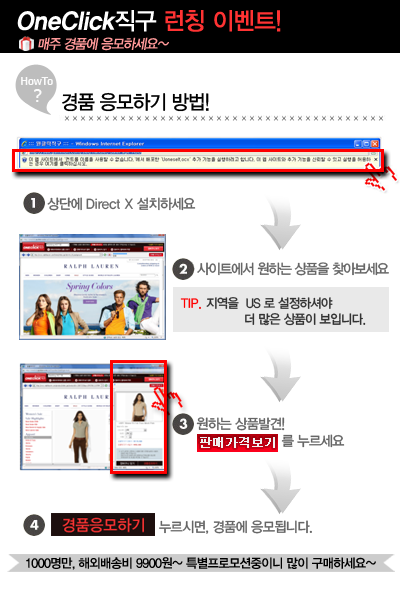
<style>
.page{position:relative;width:400px;height:591px;background:#ffffff}
.page>*{position:absolute;margin:0}
.t1{font:24px "YDIYGO350";letter-spacing:-0.025em;color:#ffffff;font-style:italic;scale:0.97 1}
.t2{font:24px "YDIYGO330";letter-spacing:-0.025em;color:#ffffff;scale:0.97 1}
.t3{font:24px "YDIYGO330";letter-spacing:-0.025em;color:#ff3333;scale:0.97 1}
.t4{font:14px "YDIYGO340";letter-spacing:-0.075em;color:#ff9999;font-style:italic;scale:0.95 1}
.t5{font:20px "YDIYGO330";letter-spacing:-0.05em;color:#000000;scale:0.95 1}
.t6{font:14px "YDIYGO330";color:#666666;scale:0.95 1}
.t7{font:14px "YDIYGO330";letter-spacing:-0.05em;color:#666666;scale:0.95 1}
.t8{font:14px "YDIYGO330";letter-spacing:-0.075em;color:#666666;scale:0.95 1}
.t9{font:13px "YDIYGO330";letter-spacing:-0.05em;color:#333333;scale:0.95 1}
.t10{font:13px "YDIYGO330";color:#ff0000;scale:0.95 1}
.t11{font:13px "YDIYGO340";letter-spacing:-0.05em;color:#000000;scale:0.95 1}
</style>
<div class="page">
<p class="t1" style="left:17px;top:10px;width:264px;height:22px">OneClick<span class="t2">직구</span><span class="t3"> 런칭 이벤트!</span></p>
<p class="t4" style="left:38px;top:37px;width:131px;height:14px">매주 경품에 응모하세요~</p>
<p class="t5" style="left:62px;top:92px;width:147px;height:20px">경품 응모하기 방법!</p>
<p class="t6" style="left:34px;top:196px;width:162px;height:15px"><span class="t7">     1) 상단에 </span>Direct X<span class="t7"> 설치하세요</span></p>
<p class="t8" style="left:184px;top:261px;width:205px;height:15px">2) 사이트에서 원하는 상품을 찾아보세요</p>
<p class="t9" style="left:180px;top:297px;width:186px;height:29px"><span class="t10">TIP. </span>지역을  US 로 설정하셔야 <br>                 더 많은 상품이 보입니다.</p>
<p class="t7" style="left:182px;top:416px;width:163px;height:32px">3) 원하는 상품발견! <br>                         를 누르세요</p>
<p class="t7" style="left:159px;top:520px;width:153px;height:14px">누르시면, 경품에 응모됩니다.</p>
<p class="t11" style="left:26px;top:557px;width:350px;height:13px">1000명만, 해외배송비 9900원~ 특별프로모션중이니 많이 구매하세요~</p>
</div>
